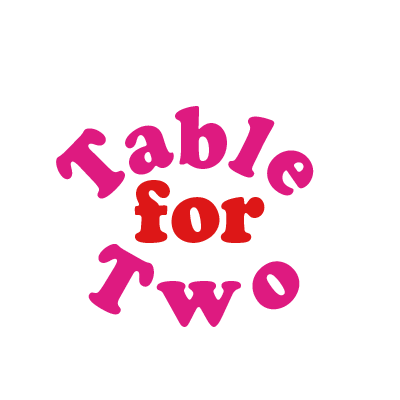
<style>
.page{position:relative;width:400px;height:400px;background:#ffffff}
.page>*{position:absolute;margin:0}
.t1{font:87.9px "CooperBlackStd";color:#de1a80;scale:0.91 1}
.t2{font:87.9px "CooperBlackStd";color:#dd1717;scale:0.91 1}
</style>
<div class="page">
<p class="t1" style="left:175px;top:106px;width:52px;height:63px">b</p>
<p class="t1" style="left:125px;top:125px;width:49px;height:50px;rotate:-18deg">a</p>
<p class="t1" style="left:228px;top:116px;width:47px;height:62px;rotate:26deg">l</p>
<p class="t1" style="left:56px;top:128px;width:69px;height:71px;rotate:-45deg">T</p>
<p class="t1" style="left:267px;top:150px;width:47px;height:46px;rotate:55deg">e</p>
<p class="t2" style="left:134px;top:180px;width:131px;height:63px">for</p>
<p class="t1" style="left:88px;top:244px;width:66px;height:71px;rotate:29deg">T</p>
<p class="t1" style="left:252px;top:261px;width:48px;height:49px;rotate:-27deg">o</p>
<p class="t1" style="left:156px;top:281px;width:85px;height:46px">w</p>
</div>
